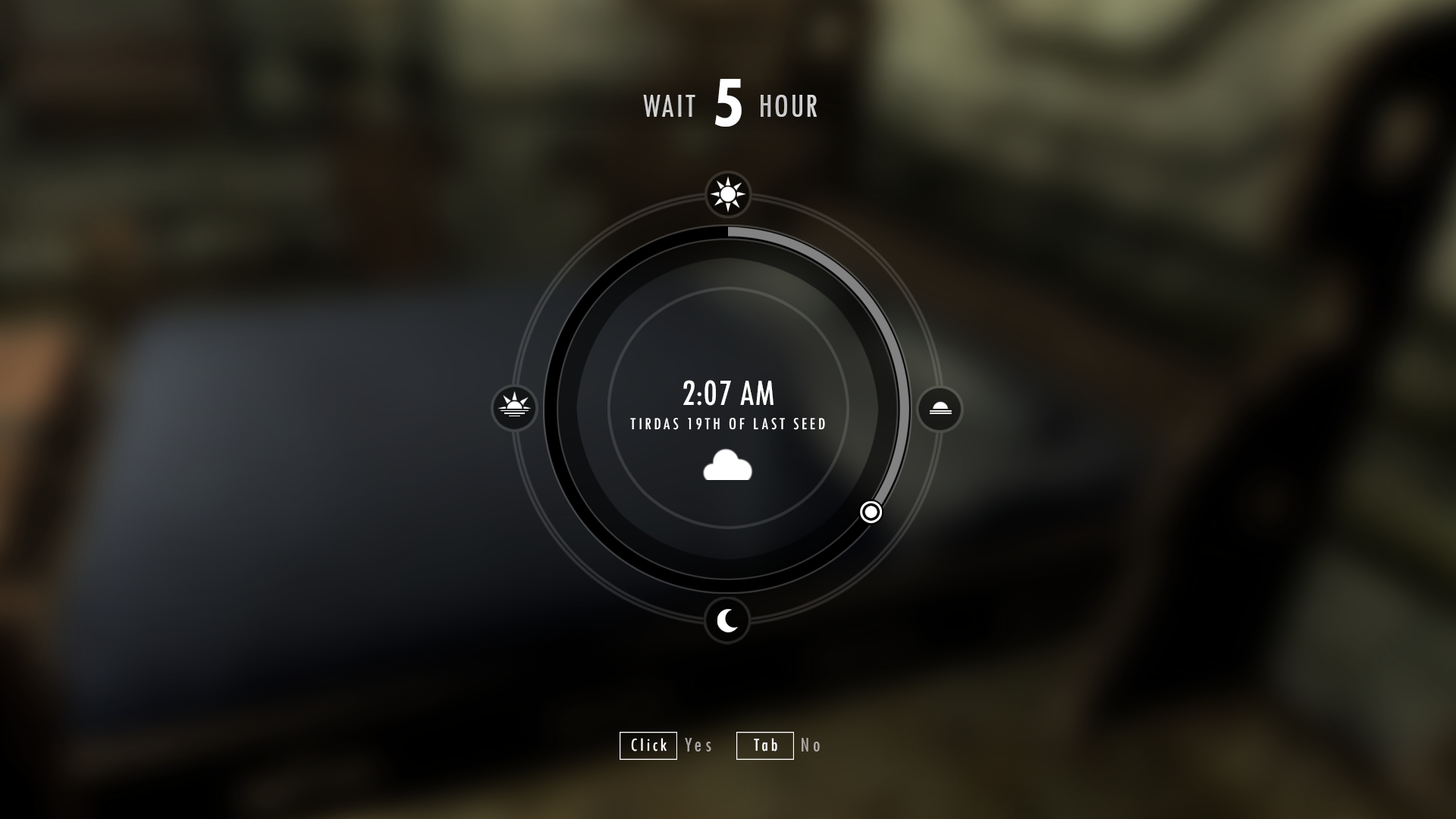
<style>
.page{position:relative;width:1456px;height:819px}
.page>*{position:absolute;margin:0}
.t1{font:76.6px "TwCenMTStd-BoldCond";letter-spacing:0.04em;color:#ffffff}
.t2{font:34.9px "TwCenMT-Condensed";letter-spacing:0.04em;color:#cfcfcf;scale:0.96 1}
.t3{font:34.9px "TwCenMT-Condensed";letter-spacing:0.04em;color:#cdcdcd;scale:0.96 1}
.t4{font:38.9px "TwCenMT-Condensed";color:#ffffff}
.t5{font:17.8px "TwCenMT-Condensed";letter-spacing:0.14em;color:#ffffff}
.t6{font:19.1px "TwCenMT-Condensed";letter-spacing:0.14em;color:#ffffff}
.t7{font:21.8px "TwCenMT-Condensed";letter-spacing:0.14em;color:#a8a7a4}
.t8{font:21.8px "TwCenMT-Condensed";letter-spacing:0.14em;color:#adaca8}
</style>
<div class="page">
<p class="t1" style="left:715px;top:79px;width:27px;height:48px">5</p>
<p class="t2" style="left:643px;top:95px;width:52px;height:22px">WAIT</p>
<p class="t3" style="left:761px;top:95px;width:56px;height:22px">HOUR</p>
<p class="t4" style="left:683px;top:380px;width:90px;height:26px">2:07 AM</p>
<p class="t5" style="left:630px;top:418px;width:195px;height:12px">TIRDAS 19TH OF LAST SEED</p>
<p class="t6" style="left:631px;top:738px;width:36px;height:13px">Click</p>
<p class="t7" style="left:685px;top:738px;width:26px;height:13px">Yes</p>
<p class="t6" style="left:754px;top:738px;width:23px;height:13px">Tab</p>
<p class="t8" style="left:802px;top:738px;width:18px;height:13px">No</p>
</div>
